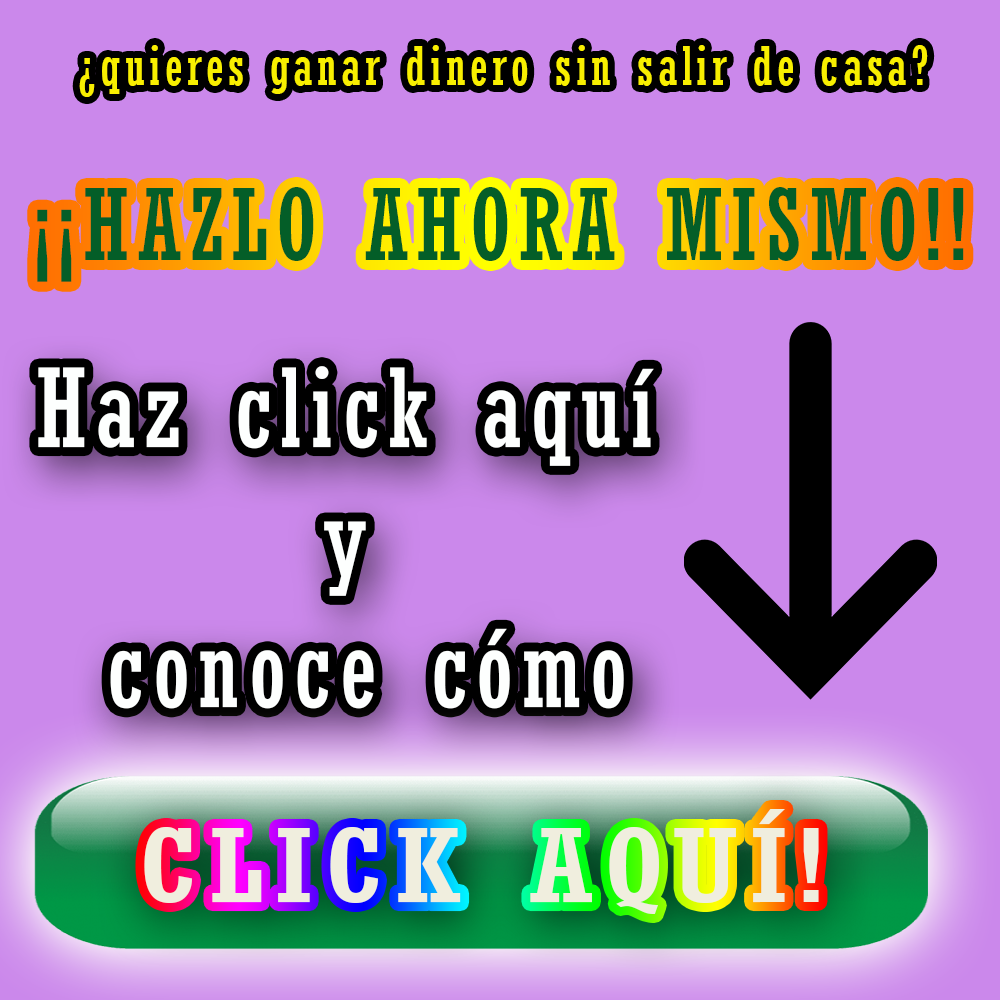
<style>
.page{position:relative;width:1000px;height:1000px;background:#cb88eb}
.page>*{position:absolute;margin:0}
.t1{font:52.6px "Rockwell-Condensed";letter-spacing:0.08em;color:#f8ef00}
.t2{font:97.9px "Rockwell-Condensed";letter-spacing:0.08em;color:#045e28}
.t3{font:108.2px "Rockwell-Condensed";letter-spacing:0.08em;color:#fdfffe}
.t4{font:100.4px "Rockwell-Condensed";letter-spacing:0.08em;color:#f0eede;scale:1.44 1}
</style>
<div class="page">
<p class="t1" style="left:79px;top:45px;width:849px;height:52px">¿quieres ganar dinero sin salir de casa?</p>
<p class="t2" style="left:37px;top:187px;width:927px;height:95px">¡¡HAZLO AHORA MISMO!!</p>
<p class="t3" style="left:38px;top:366px;width:616px;height:343px;text-align:center">Haz click aquí <br>y <br>conoce cómo</p>
<p class="t4" style="left:144px;top:809px;width:675px;height:105px">CLICK AQUÍ!</p>
</div>
